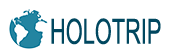
<style>
.page{position:relative;width:170px;height:50px;background:#ffffff}
.page>*{position:absolute;margin:0}
.t1{font:34.7px "ArialMT";color:#00475f;scale:0.63 1}
</style>
<div class="page">
<p class="t1" style="left:51px;top:18px;width:110px;height:27px">HOLOTRIP</p>
</div>
